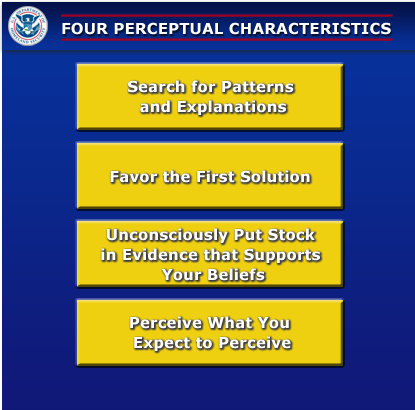
<style>
.page{position:relative;width:415px;height:410px;background:#eed011}
.page>*{position:absolute;margin:0}
.t1{font:15px "Verdana-Bold";letter-spacing:0.01em;color:#ffffff;text-transform:uppercase}
.t2{font:15px/20px "Verdana-Bold";letter-spacing:0.01em;color:#ffffff}
.t3{font:15px "Verdana-Bold";letter-spacing:0.01em;color:#ffffff}
</style>
<div class="page">
<p class="t1" style="left:62px;top:22px;width:329px;height:13px">Four Perceptual Characteristics</p>
<p class="t2" style="left:128px;top:80px;width:166px;height:35px;text-align:center">Search for Patterns <br>and Explanations</p>
<p class="t3" style="left:110px;top:170px;width:200px;height:13px">Favor the First Solution</p>
<p class="t2" style="left:101px;top:228px;width:219px;height:53px;text-align:center">Unconsciously Put Stock <br>in Evidence that Supports <br>Your Beliefs</p>
<p class="t2" style="left:130px;top:316px;width:161px;height:35px;text-align:center">Perceive What You <br>Expect to Perceive</p>
</div>
